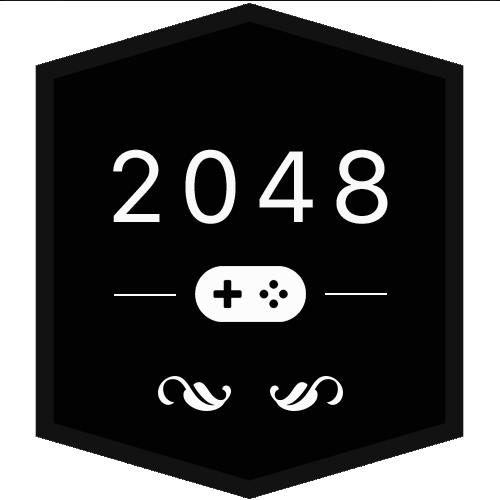
<style>
.page{position:relative;width:500px;height:500px;background:#020202}
.page>*{position:absolute;margin:0}
.t1{font:100px "SFText-Regular";letter-spacing:0.12em;color:#f9f9f9}
</style>
<div class="page">
<p class="t1" style="left:113px;top:148px;width:275px;height:75px">2048</p>
</div>
